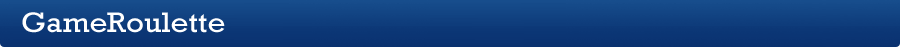
<style>
.page{position:relative;width:900px;height:47px}
.page>*{position:absolute;margin:0}
.t1{font:28.8px "Rockwell";color:#ffffff;scale:1.08 1}
</style>
<div class="page">
<p class="t1" style="left:22px;top:12px;width:203px;height:21px">GameRoulette</p>
</div>
